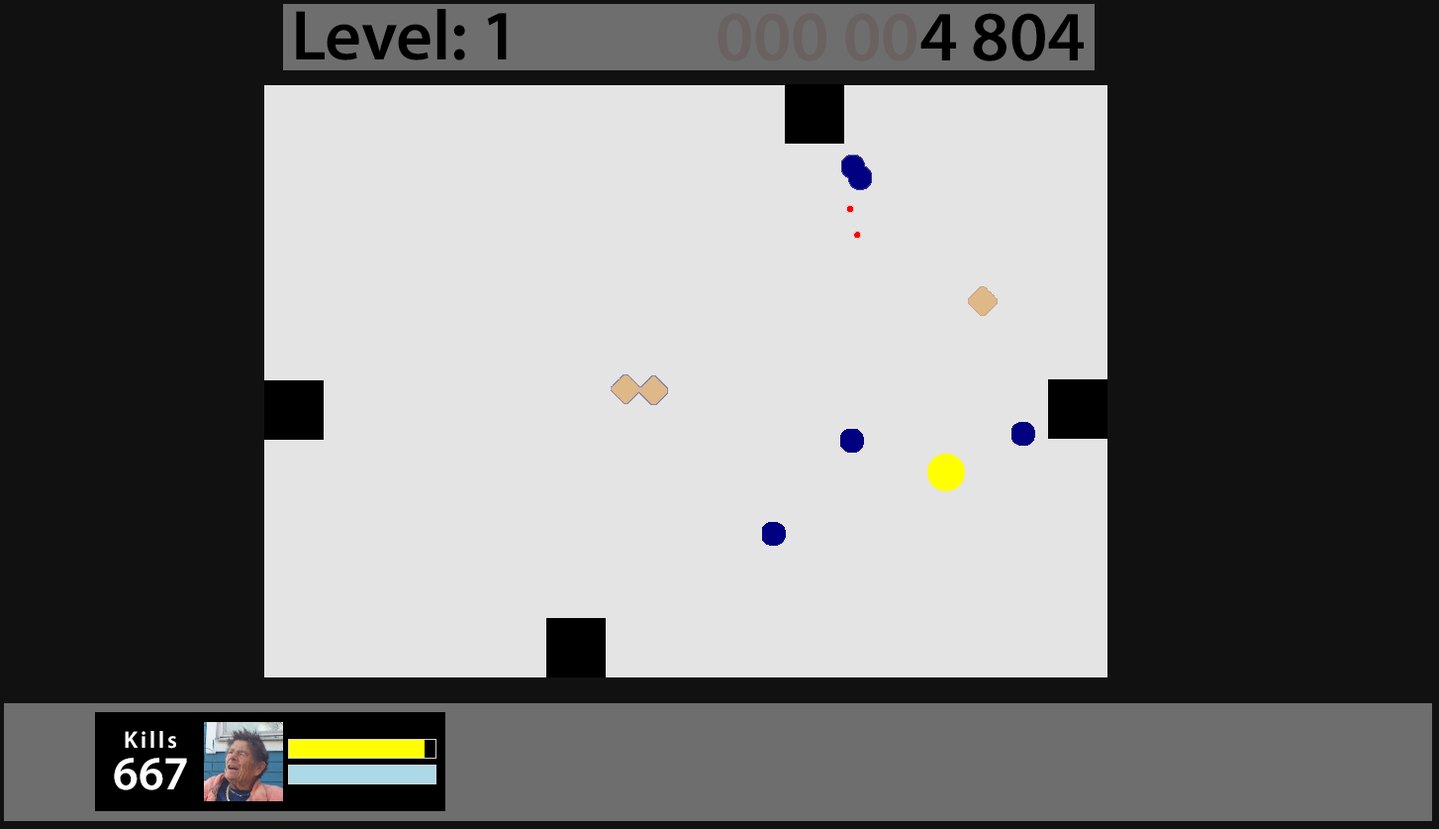
<style>
.page{position:relative;width:1439px;height:829px;background:#e4e4e4}
.page>*{position:absolute;margin:0}
.t1{font:71.3px "MyriadPro-Semibold";letter-spacing:-0.005em;color:#000000}
.t2{font:71.3px "MyriadPro-Semibold";letter-spacing:-0.005em;color:#6a6161}
.t3{font:23.8px "MyriadPro-Semibold";letter-spacing:0.12em;color:#ffffff}
.t4{font:47.5px "MyriadPro-Semibold";letter-spacing:-0.005em;color:#ffffff}
</style>
<div class="page">
<p class="t1" style="left:296px;top:9px;width:211px;height:51px">Level: 1</p>
<p class="t2" style="left:718px;top:13px;width:366px;height:48px">000 00<span class="t1">4 804</span></p>
<p class="t3" style="left:125px;top:731px;width:51px;height:17px">Kills</p>
<p class="t4" style="left:114px;top:757px;width:73px;height:33px">667</p>
</div>
